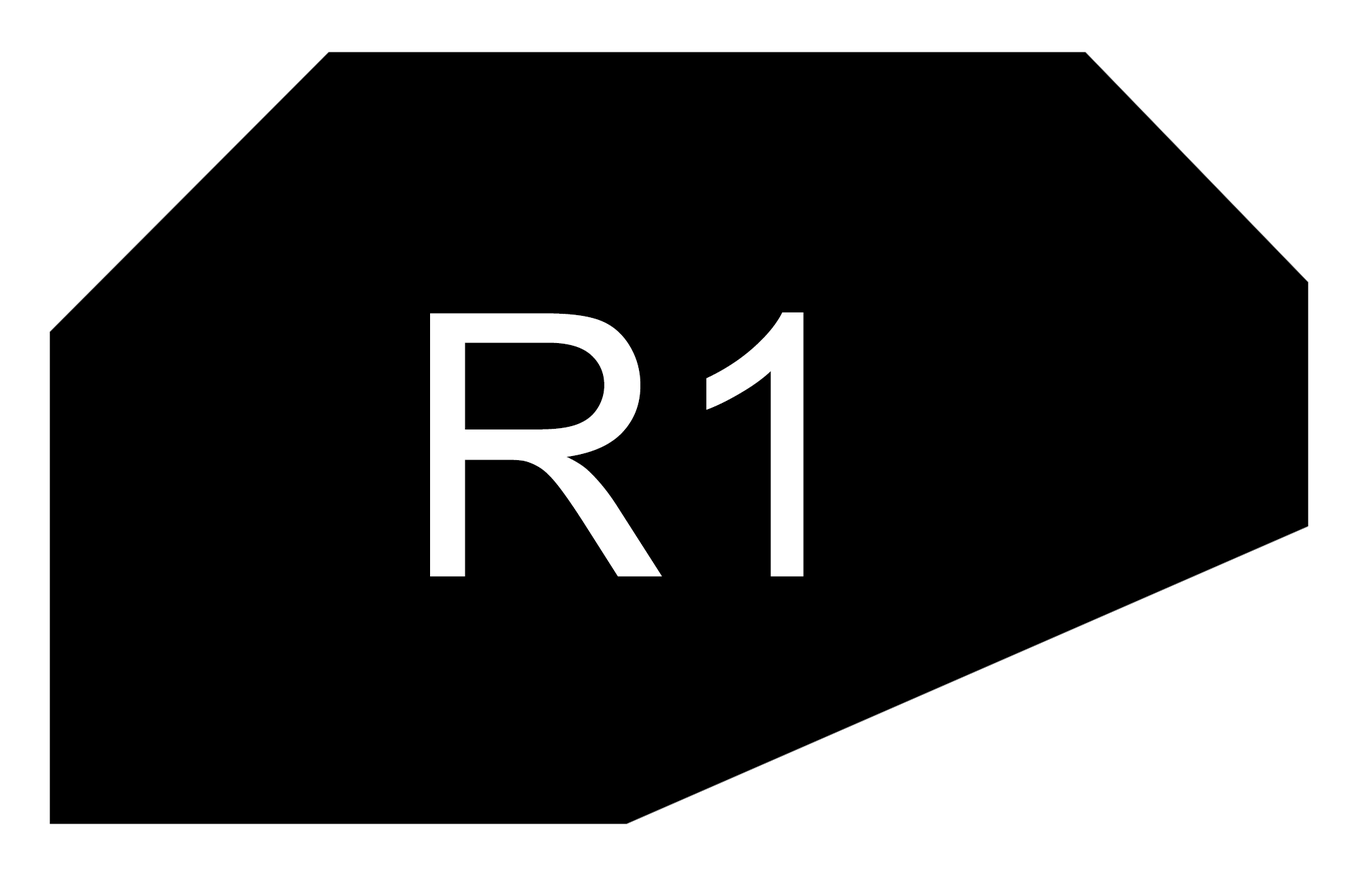
<style>
.page{position:relative;width:1361px;height:876px;background:#000000}
.page>*{position:absolute;margin:0}
.t1{font:367.1px "ArialMT";color:#ffffff}
</style>
<div class="page">
<p class="t1" style="left:430px;top:312px;width:374px;height:264px">R1</p>
</div>
